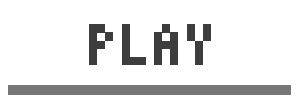
<style>
.page{position:relative;width:300px;height:100px;background:#ffffff}
.page>*{position:absolute;margin:0}
.t1{font:65px "Pixelated";color:#3d3d3d}
</style>
<div class="page">
<p class="t1" style="left:89px;top:24px;width:122px;height:41px">PLAY</p>
</div>
